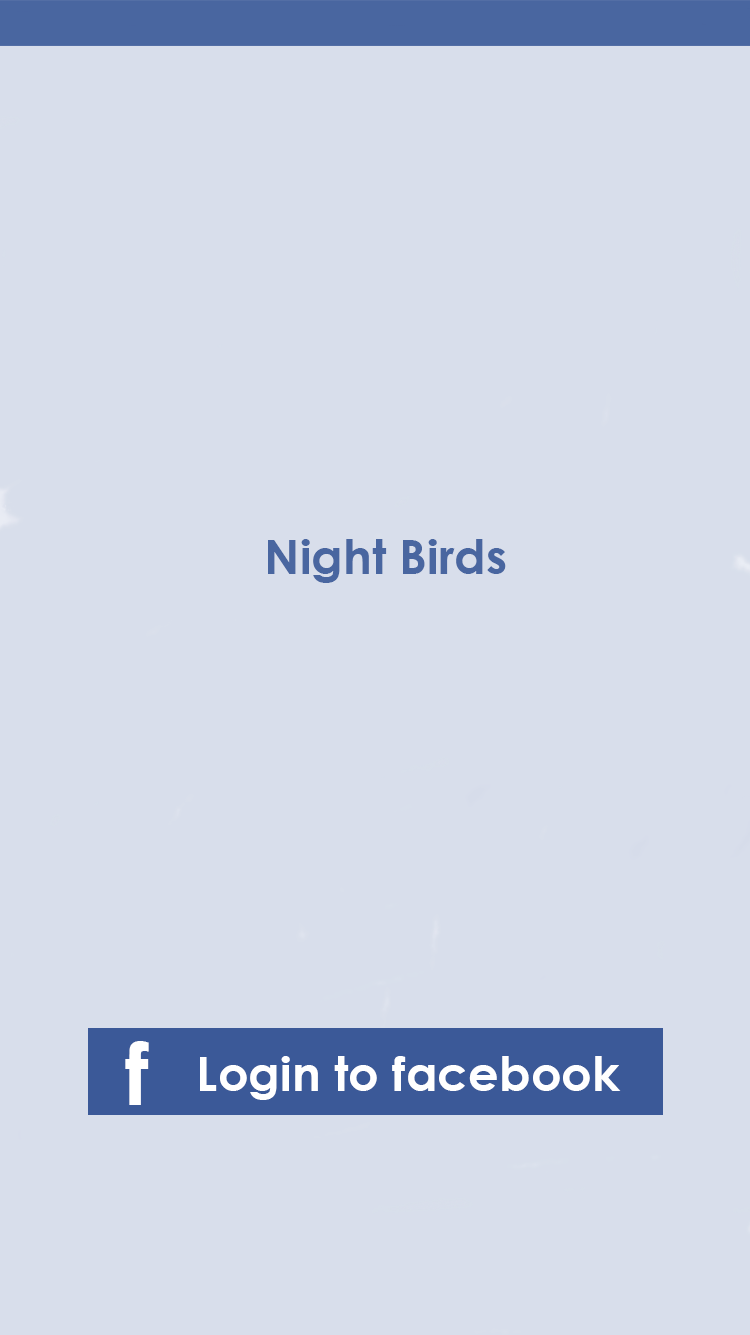
<style>
.page{position:relative;width:750px;height:1335px;background:#d8deeb}
.page>*{position:absolute;margin:0}
.t1{font:48px "CenturyGothic-Bold";color:#4966a0}
.t2{font:86px "CenturyGothic-Bold";color:#ffffff}
.t3{font:48px "CenturyGothic-Bold";color:#ffffff}
</style>
<div class="page">
<p class="t1" style="left:268px;top:539px;width:238px;height:44px">Night Birds</p>
<p class="t2" style="left:125px;top:1041px;width:24px;height:64px">f</p>
<p class="t3" style="left:200px;top:1056px;width:421px;height:44px">Login to facebook</p>
</div>
